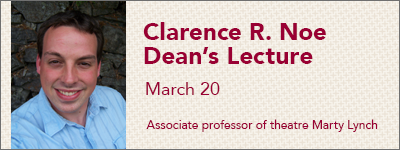
<style>
.page{position:relative;width:400px;height:150px}
.page>*{position:absolute;margin:0}
.t1{font:24px/24px "Avenir-Black";color:#990033}
.t2{font:18px "Avenir-Roman";color:#990033}
.t3{font:12px "Avenir-Roman";color:#990033}
</style>
<div class="page">
<p class="t1" style="left:143px;top:22px;width:183px;height:42px">Clarence R. Noe<br>Dean’s Lecture</p>
<p class="t2" style="left:146px;top:82px;width:74px;height:13px">March 20</p>
<p class="t3" style="left:146px;top:119px;width:232px;height:13px">Associate professor of theatre Marty Lynch</p>
</div>
